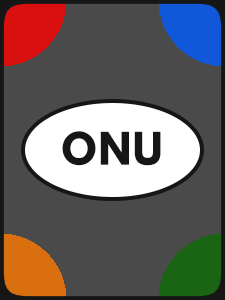
<style>
.page{position:relative;width:225px;height:300px;background:#4a4a4a}
.page>*{position:absolute;margin:0}
.t1{font:40px "LeagueSpartan-Bold";letter-spacing:0.04em;color:#161616}
</style>
<div class="page">
<p class="t1" style="left:62px;top:131px;width:99px;height:35px">ONU</p>
</div>
